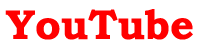
<style>
.page{position:relative;width:200px;height:50px;background:#ffffff}
.page>*{position:absolute;margin:0}
.t1{font:41.7px "BookmanOldStyle-Bold";color:#ff0000}
</style>
<div class="page">
<p class="t1" style="left:5px;top:9px;width:188px;height:31px">YouTube</p>
</div>
